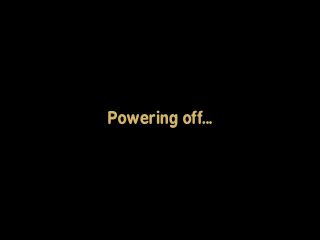
<style>
.page{position:relative;width:320px;height:240px;background:#000000}
.page>*{position:absolute;margin:0}
.t1{font:16px "BPreplay-Bold";color:#d2b46c}
</style>
<div class="page">
<p class="t1" style="left:108px;top:110px;width:104px;height:18px">Powering off...</p>
</div>
